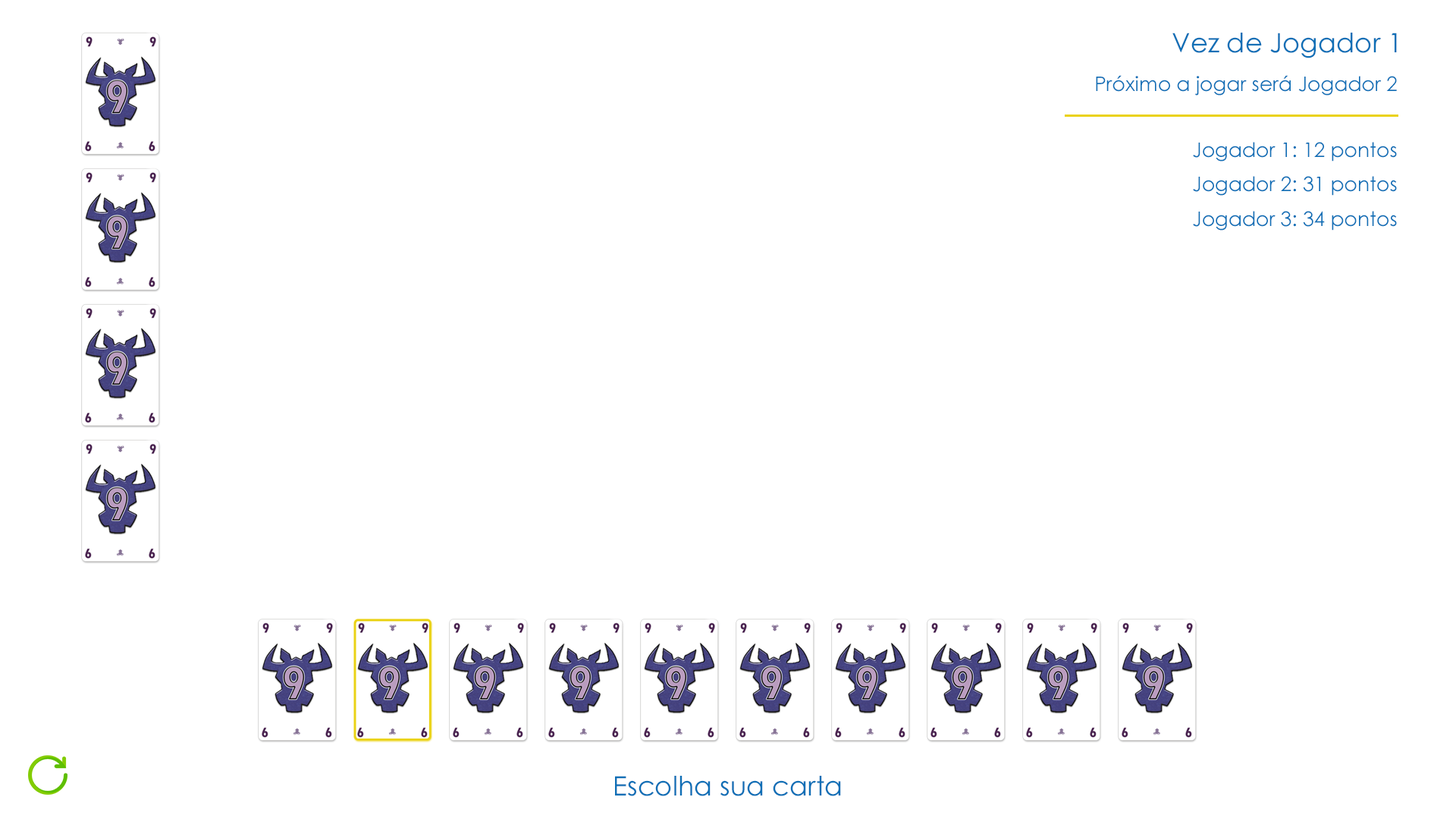
<style>
.page{position:relative;width:1456px;height:819px;background:#ffffff}
.page>*{position:absolute;margin:0}
.t1{font:26.8px "CenturyGothic";color:#0e6fb6}
.t2{font:20.1px "CenturyGothic";color:#0e6fb6}
.t3{font:20.1px/33.4px "CenturyGothic";color:#0e6fb6}
</style>
<div class="page">
<p class="t1" style="left:1172px;top:33px;width:225px;height:25px">Vez de Jogador 1</p>
<p class="t2" style="left:1096px;top:75px;width:301px;height:21px">Próximo a jogar será Jogador 2</p>
<p class="t3" style="left:1193px;top:142px;width:204px;height:89px">Jogador 1: 12 pontos<br>Jogador 2: 31 pontos<br>Jogador 3: 34 pontos</p>
<p class="t1" style="left:615px;top:776px;width:226px;height:20px">Escolha sua carta</p>
</div>
